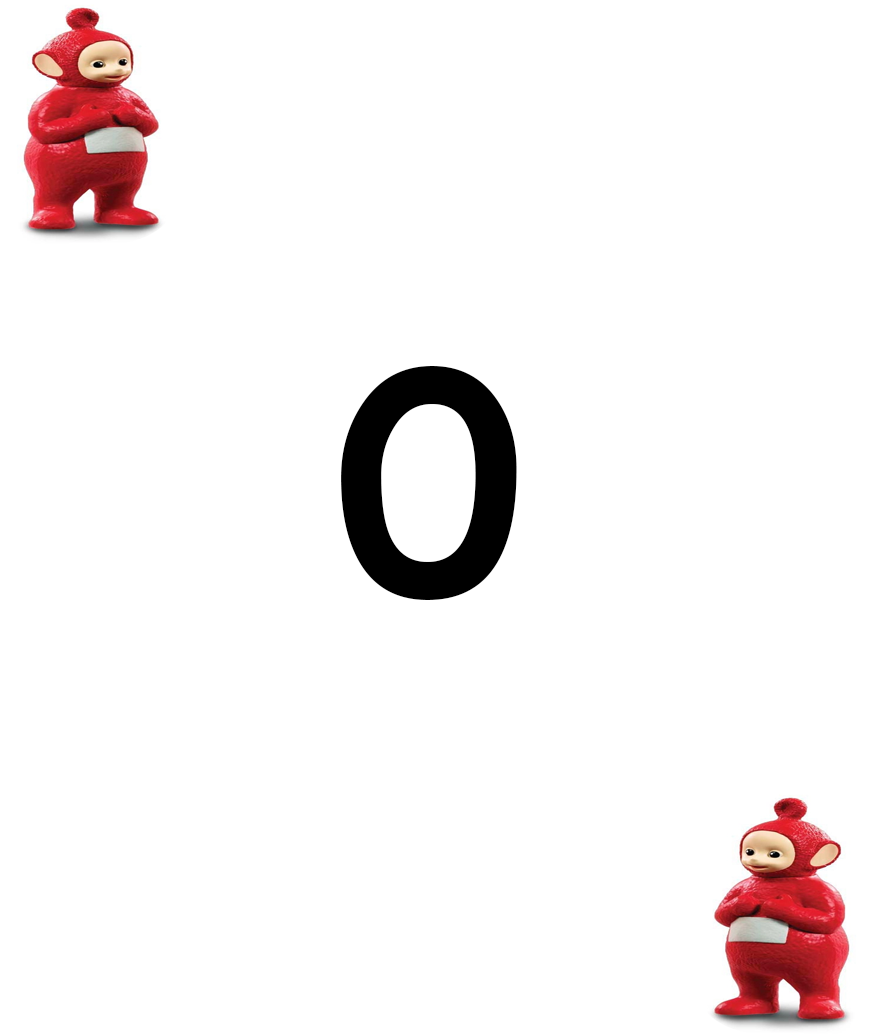
<style>
.page{position:relative;width:873px;height:1036px;background:#ffffff}
.page>*{position:absolute;margin:0}
.t1{font:300px "ComicSansMS-Bold";color:#000000;font-variant:small-caps}
</style>
<div class="page">
<p class="t1" style="left:341px;top:366px;width:176px;height:234px">0</p>
</div>
